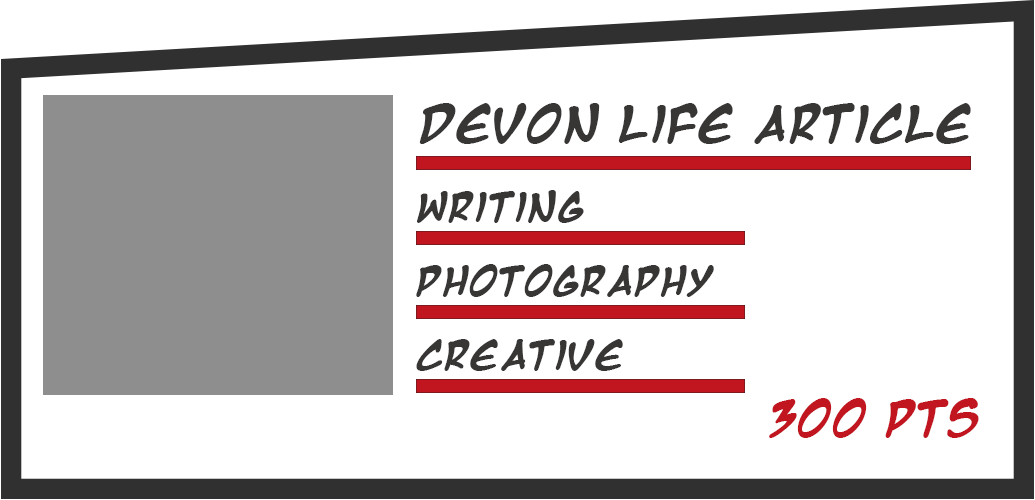
<style>
.page{position:relative;width:1035px;height:500px;background:#ffffff}
.page>*{position:absolute;margin:0}
.t1{font:41.7px "MangaTempleBold";color:#383535}
.t2{font:33.4px "MangaTempleBold";color:#383535}
.t3{font:40.2px "MangaTempleBold";color:#c11520}
</style>
<div class="page">
<p class="t1" style="left:419px;top:103px;width:552px;height:41px">Devon Life Article</p>
<p class="t2" style="left:417px;top:190px;width:167px;height:33px">Writing</p>
<p class="t2" style="left:416px;top:264px;width:298px;height:33px">PHotography</p>
<p class="t2" style="left:416px;top:339px;width:207px;height:32px">Creative</p>
<p class="t3" style="left:769px;top:398px;width:210px;height:40px">300 pts</p>
</div>
